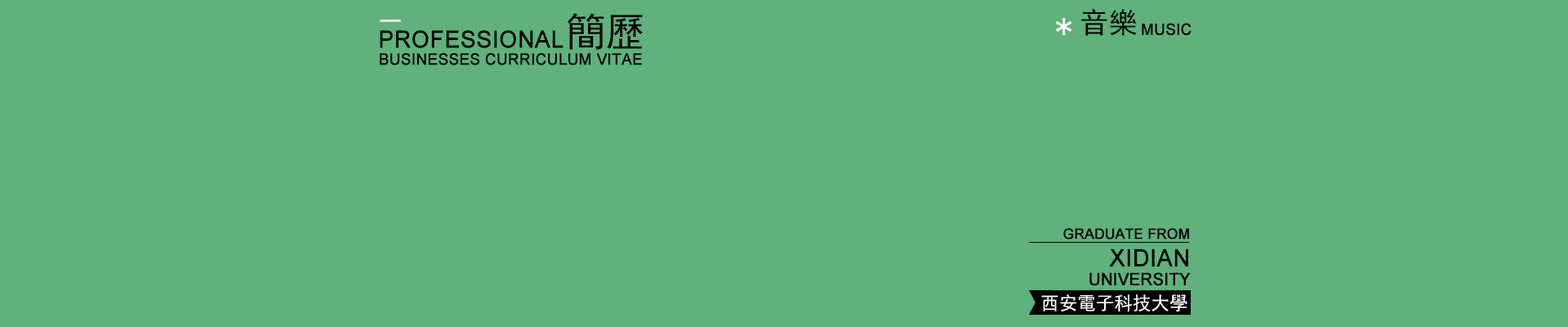
<style>
.page{position:relative;width:1568px;height:327px;background:#60b17c}
.page>*{position:absolute;margin:0}
.t1{font:39.5px "SimHei";color:#000000}
.t2{font:34.5px "SimHei";color:#ffffff}
.t3{font:28.9px "SimHei";color:#000000}
.t4{font:31.1px "SimHei";color:#ffffff;scale:1.49 1}
.t5{font:15.7px "ArialMT";color:#000000;font-weight:bold;scale:0.97 1}
.t6{font:23.7px "ArialMT";color:#000000;font-weight:bold;scale:0.97 1}
.t7{font:15.6px "ArialMT";color:#000000;font-weight:bold}
.t8{font:14.1px "ArialMT";color:#000000;font-weight:bold}
.t9{font:23.6px "ArialMT";color:#000000;font-weight:bold}
.t10{font:16.8px "ArialMT";color:#000000;font-weight:bold;scale:0.97 1}
.t11{font:18.6px "SimHei";color:#ffffff}
</style>
<div class="page">
<p class="t1" style="left:567px;top:13px;width:76px;height:37px">簡歷</p>
<p class="t2" style="left:1056px;top:18px;width:16px;height:17px">*</p>
<p class="t3" style="left:1081px;top:8px;width:56px;height:28px">音樂</p>
<p class="t4" style="left:380px;top:20px;width:21px;height:2px">-</p>
<p class="t5" style="left:1142px;top:23px;width:50px;height:12px">MUSIC</p>
<p class="t6" style="left:380px;top:30px;width:184px;height:18px">PROFESSIONAL</p>
<p class="t7" style="left:380px;top:53px;width:262px;height:12px">BUSINESSES CURRICULUM VITAE</p>
<p class="t8" style="left:1063px;top:228px;width:126px;height:11px">GRADUATE FROM</p>
<p class="t9" style="left:1109px;top:248px;width:79px;height:18px">XIDIAN</p>
<p class="t10" style="left:1089px;top:272px;width:102px;height:14px">UNIVERSITY</p>
<p class="t11" style="left:1041px;top:294px;width:146px;height:18px">西安電子科技大學</p>
</div>
